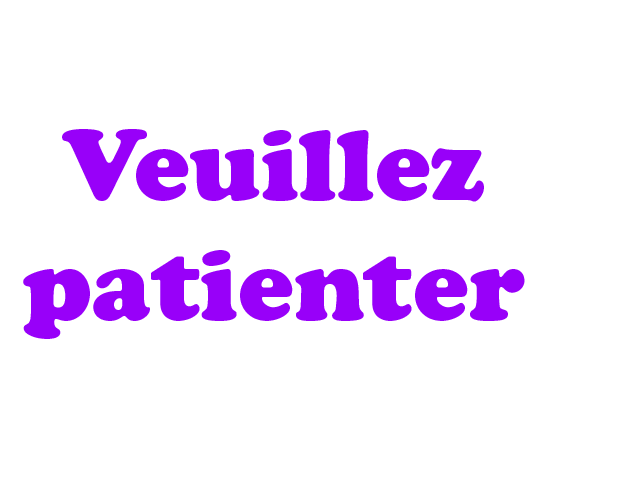
<style>
.page{position:relative;width:640px;height:480px;background:#ffffff}
.page>*{position:absolute;margin:0}
.t1{font:100px "CooperBlackStd";color:#9800f9}
</style>
<div class="page">
<p class="t1" style="left:23px;top:129px;width:502px;height:210px;text-align:center">Veuillez<br>patienter</p>
</div>
